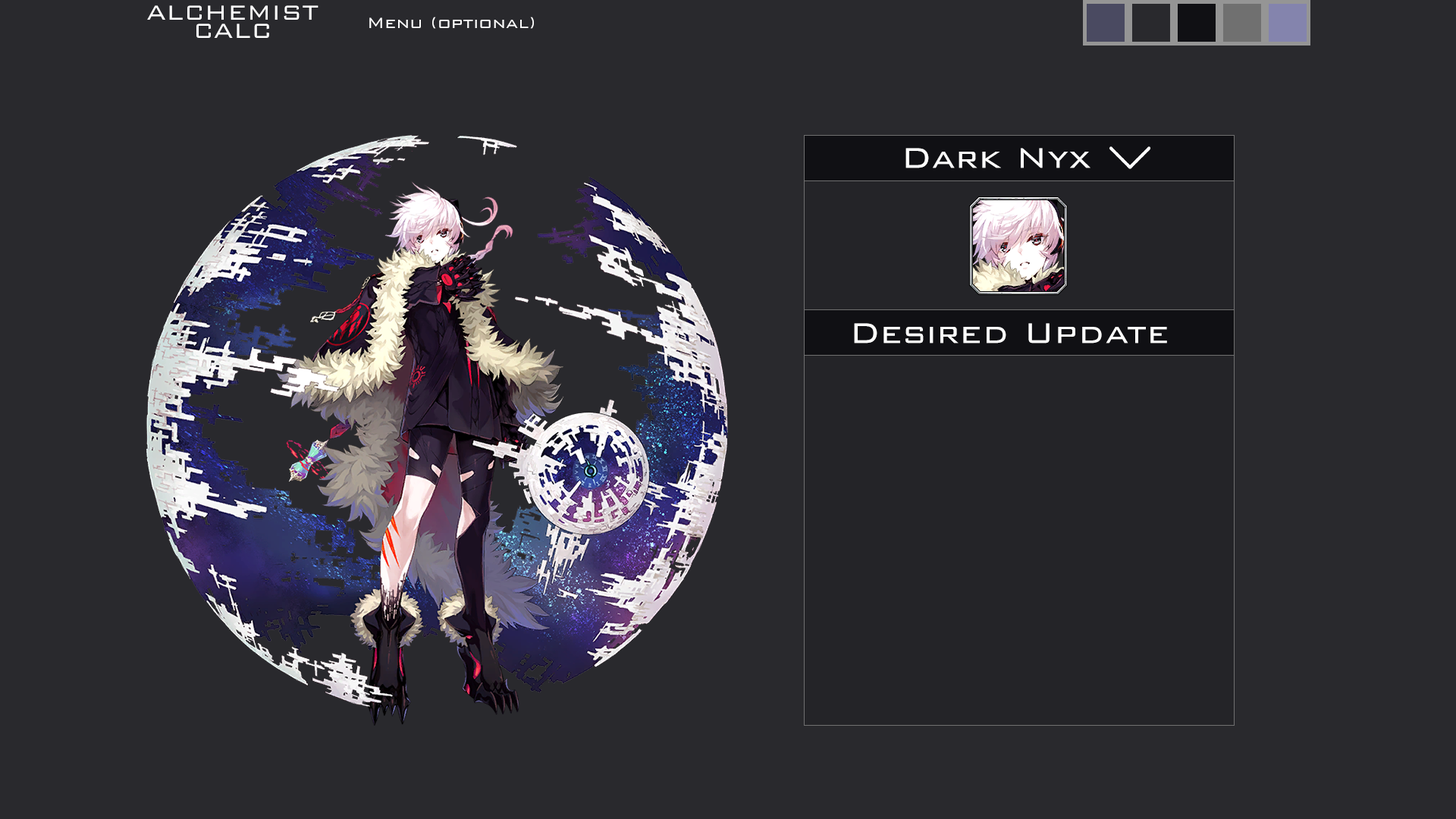
<style>
.page{position:relative;width:1456px;height:819px;background:#29292d}
.page>*{position:absolute;margin:0}
.t1{font:27.3px "BankGothicBT-Light";color:#ffffff;text-transform:uppercase}
.t2{font:19.7px "BankGothicBT-Light";color:#ffffff}
.t3{font:37.9px "BankGothicBT-Light";color:#ffffff}
</style>
<div class="page">
<p class="t1" style="left:147px;top:5px;width:171px;height:33px">Alchemist Calc</p>
<p class="t2" style="left:369px;top:17px;width:165px;height:12px">Menu (optional)</p>
<p class="t3" style="left:905px;top:148px;width:185px;height:20px">Dark Nyx</p>
<p class="t3" style="left:854px;top:323px;width:313px;height:21px">Desired Update</p>
</div>
